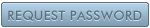
<style>
.page{position:relative;width:150px;height:28px}
.page>*{position:absolute;margin:0}
.t1{font:13px "FuturaBT-Medium";letter-spacing:0.025em;color:#5c717d;text-transform:uppercase}
</style>
<div class="page">
<p class="t1" style="left:8px;top:10px;width:134px;height:11px">Request password</p>
</div>
